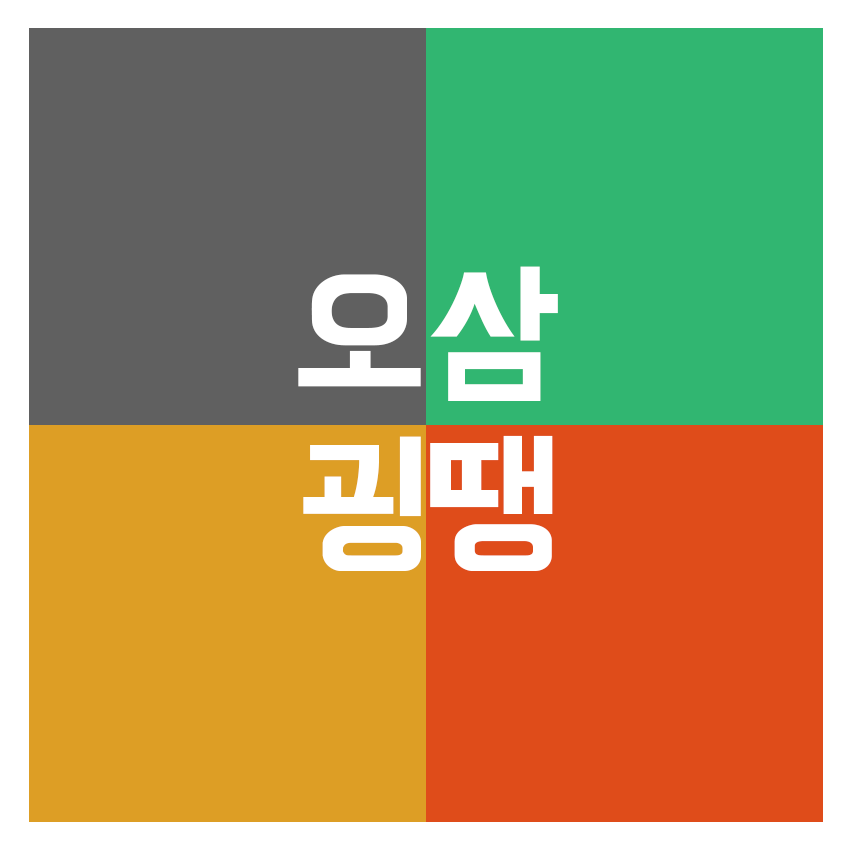
<style>
.page{position:relative;width:850px;height:850px;background:#606060}
.page>*{position:absolute;margin:0}
.t1{font:160px "BMHANNA11yrsoldOTF";color:#ffffff}
</style>
<div class="page">
<p class="t1" style="left:430px;top:266px;width:128px;height:135px">삼</p>
<p class="t1" style="left:298px;top:274px;width:123px;height:113px">오</p>
<p class="t1" style="left:303px;top:436px;width:118px;height:135px">굉</p>
<p class="t1" style="left:430px;top:435px;width:123px;height:136px">땡</p>
</div>
